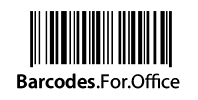
<style>
.page{position:relative;width:198px;height:100px;background:#ffffff}
.page>*{position:absolute;margin:0}
.t1{font:20px "MyriadConceptRoman-Regular";color:#000000}
.t2{font:20px "MyriadConceptRoman-Semibold";color:#000000}
</style>
<div class="page">
<p class="t1" style="left:17px;top:73px;width:163px;height:16px"><span class="t2">Barcodes</span>.For.Office</p>
</div>
